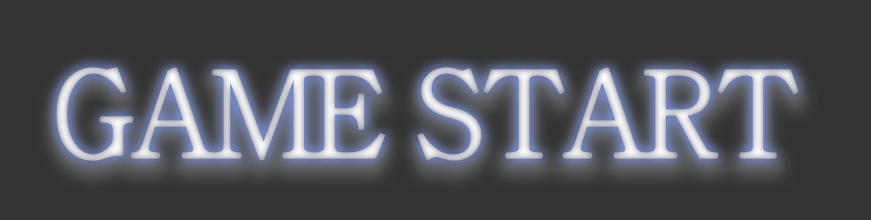
<style>
.page{position:relative;width:871px;height:220px;background:#333333}
.page>*{position:absolute;margin:0}
.t1{font:120px "HyhwpEQ";letter-spacing:-0.1em;font-weight:bold}
</style>
<div class="page">
<p class="t1" style="left:56px;top:67px;width:743px;height:94px">GAME START</p>
</div>
